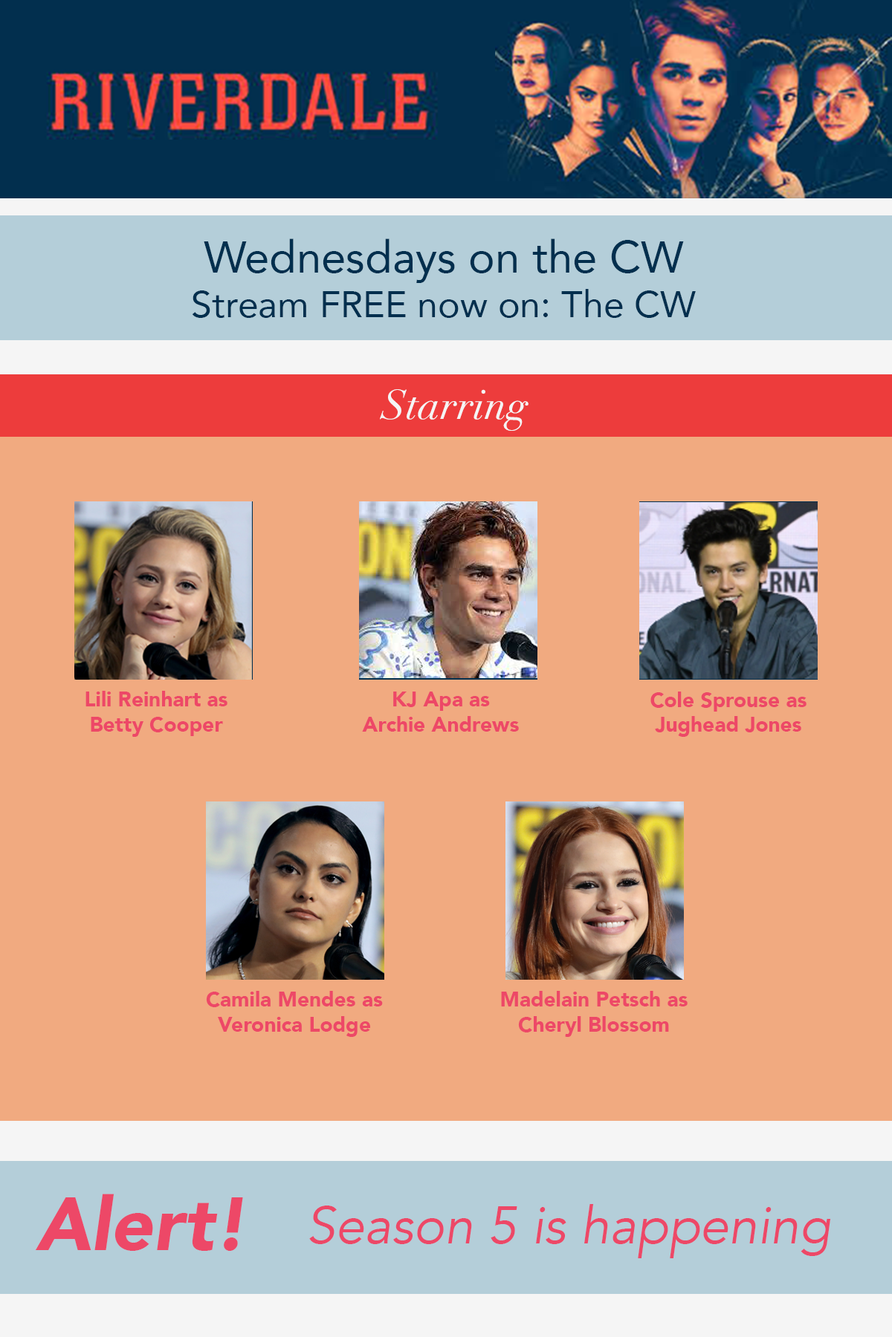
<style>
.page{position:relative;width:892px;height:1337px;background:#f1aa80}
.page>*{position:absolute;margin:0}
.t1{font:37.2px "Avenir-Roman";color:#022f4e}
.t2{font:44.6px "Avenir-Roman";color:#022f4e}
.t3{font:40.9px "Didot-Italic";color:#f5f5f5}
.t4{font:20.8px "Avenir-Black";color:#ed4867}
.t5{font:74.3px "Avenir-BlackOblique";color:#ed4867}
.t6{font:52px "Avenir-BookOblique";color:#ed4867}
</style>
<div class="page">
<p class="t1" style="left:192px;top:239px;width:503px;height:79px;text-align:center"><span class="t2">Wednesdays on the CW<br></span>Stream FREE now on: The CW</p>
<p class="t3" style="left:380px;top:389px;width:148px;height:42px">Starring</p>
<p class="t4" style="left:85px;top:691px;width:142px;height:46px;text-align:center">Lili Reinhart as<br>Betty Cooper</p>
<p class="t4" style="left:362px;top:692px;width:157px;height:40px;text-align:center">KJ Apa as<br>Archie Andrews</p>
<p class="t4" style="left:650px;top:692px;width:156px;height:45px;text-align:center">Cole Sprouse as<br>Jughead Jones</p>
<p class="t4" style="left:206px;top:991px;width:177px;height:46px;text-align:center">Camila Mendes as<br>Veronica Lodge</p>
<p class="t4" style="left:501px;top:991px;width:186px;height:46px;text-align:center">Madelain Petsch as<br>Cheryl Blossom</p>
<p class="t5" style="left:35px;top:1194px;width:208px;height:57px">Alert!</p>
<p class="t6" style="left:309px;top:1204px;width:522px;height:55px">Season 5 is happening</p>
</div>
